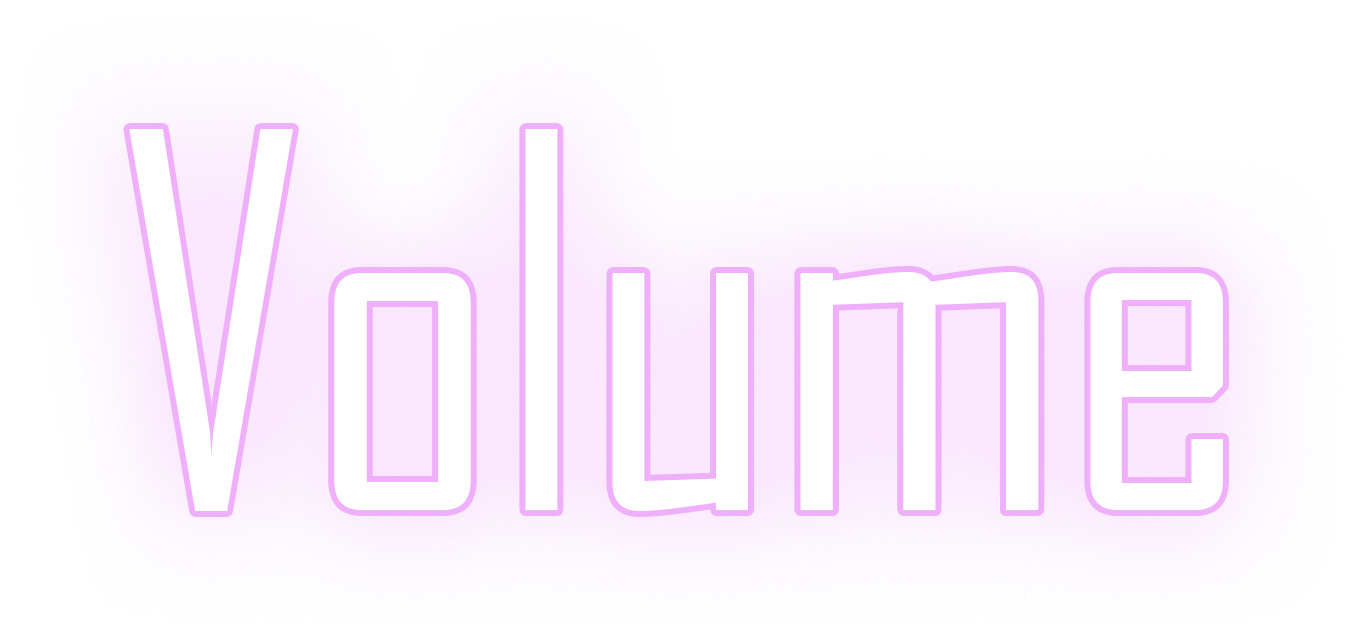
<style>
.page{position:relative;width:1353px;height:641px;background:#ffffff}
.page>*{position:absolute;margin:0}
.t1{font:498px "AgencyFB-Reg";color:#ffffff}
</style>
<div class="page">
<p class="t1" style="left:129px;top:129px;width:1094px;height:382px">Volume</p>
</div>
